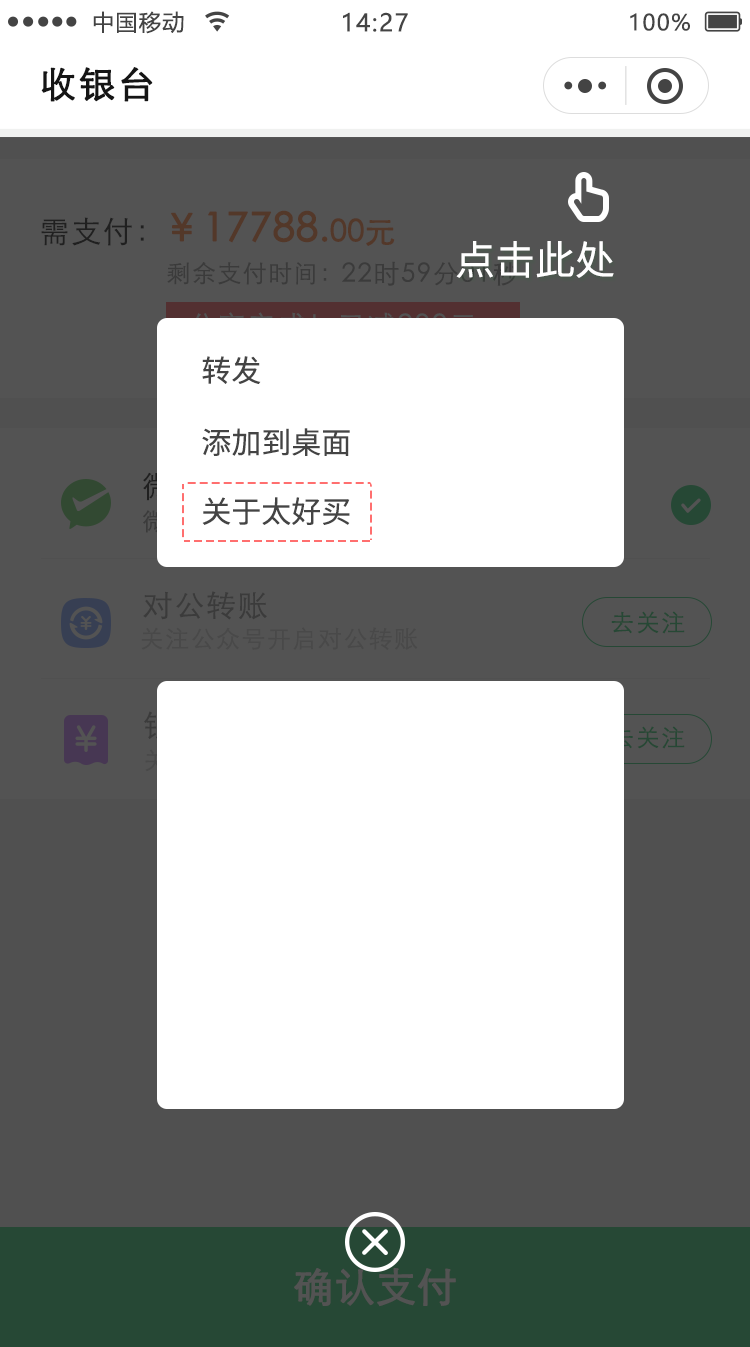
<style>
.page{position:relative;width:750px;height:1347px;background:#ffffff}
.page>*{position:absolute;margin:0}
.t1{font:22px "MicrosoftYaHei";letter-spacing:0.06em;color:#444444}
.t2{font:24px "MicrosoftYaHei";letter-spacing:0.06em;color:#444444}
.t3{font:36px "STXihei";letter-spacing:0.06em;color:#151515;font-weight:bold}
.t4{font:30px "STXihei";letter-spacing:0.06em;color:#202020}
.t5{font:40px "STXihei";color:#533829;font-weight:bold}
.t6{font:36px "STXihei";color:#533829;font-weight:bold}
.t7{font:30px "STXihei";color:#533829;font-weight:bold}
.t8{font:40px "NotoSansCJKsc-Regular";color:#ffffff}
.t9{font:24px "STXihei";letter-spacing:0.06em;color:#3b3b3b}
.t10{font:30px "NotoSansCJKsc-Regular";color:#444444}
.t11{font:30px "STXihei";letter-spacing:0.06em;color:#3b3b3b}
.t12{font:24px "STXihei";letter-spacing:0.06em;color:#264835}
.t13{font:24px "STXihei";letter-spacing:0.06em;color:#494949}
.t14{font:40px "STXihei";color:#535353;font-weight:bold}
</style>
<div class="page">
<p class="t1" style="left:93px;top:11px;width:91px;height:23px">中国移动</p>
<p class="t2" style="left:343px;top:12px;width:65px;height:20px">14:27</p>
<p class="t1" style="left:630px;top:13px;width:60px;height:18px">100%</p>
<p class="t3" style="left:41px;top:67px;width:112px;height:35px">收银台</p>
<p class="t4" style="left:41px;top:217px;width:103px;height:29px">需支付：</p>
<p class="t5" style="left:171px;top:210px;width:224px;height:36px">￥17788<span class="t6">.</span><span class="t7">00元</span></p>
<p class="t8" style="left:456px;top:241px;width:158px;height:37px">点击此处</p>
<p class="t9" style="left:167px;top:262px;width:160px;height:23px">剩余支付时间：</p>
<p class="t10" style="left:202px;top:356px;width:59px;height:28px">转发</p>
<p class="t10" style="left:202px;top:428px;width:148px;height:28px">添加到桌面</p>
<p class="t10" style="left:202px;top:497px;width:148px;height:28px">关于太好买</p>
<p class="t11" style="left:143px;top:591px;width:124px;height:29px">对公转账</p>
<p class="t12" style="left:611px;top:611px;width:74px;height:23px">去关注</p>
<p class="t13" style="left:141px;top:627px;width:277px;height:23px">关注公众号开启对公转账</p>
<p class="t14" style="left:294px;top:1267px;width:162px;height:40px">确认支付</p>
</div>
